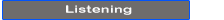
<style>
.page{position:relative;width:224px;height:20px;background:#6e6c6c}
.page>*{position:absolute;margin:0}
.t1{font:10.2px "ArialRoundedMTBold";color:#fcfcfc;scale:1.47 1}
</style>
<div class="page">
<p class="t1" style="left:66px;top:5px;width:66px;height:10px">Listening</p>
</div>
